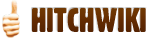
<style>
.page{position:relative;width:147px;height:38px;background:#ffffff}
.page>*{position:absolute;margin:0}
.t1{font:33.4px "Gothic821CondensedBT-Regular";color:#632b02;text-transform:uppercase}
</style>
<div class="page">
<p class="t1" style="left:32px;top:8px;width:114px;height:24px">Hitchwiki</p>
</div>
